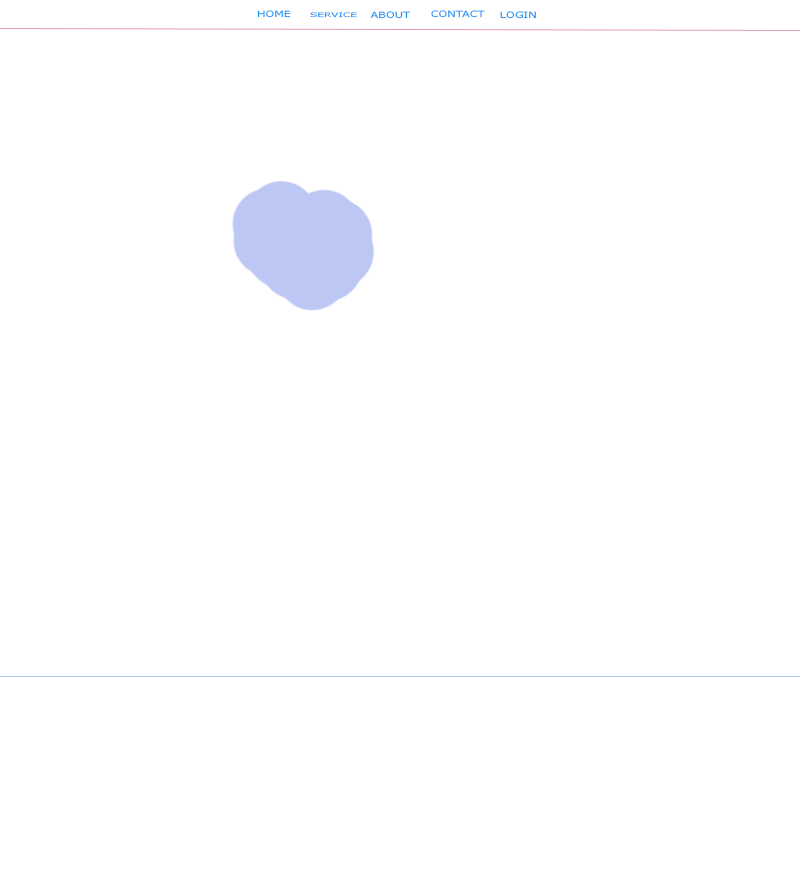
<style>
.page{position:relative;width:800px;height:876px;background:#ffffff}
.page>*{position:absolute;margin:0}
.t1{font:8.5px "Verdana";color:#0d92f3;scale:1.33 1}
.t2{font:5.9px "Verdana";color:#0d92f3;scale:1.79 1}
.t3{font:8.5px "Verdana";scale:1.33 1}
</style>
<div class="page">
<p class="t1" style="left:257px;top:10px;width:34px;height:8px">HOME</p>
<p class="t2" style="left:310px;top:12px;width:47px;height:6px">SERVICE</p>
<p class="t1" style="left:370px;top:11px;width:41px;height:8px">ABOUT</p>
<p class="t3" style="left:431px;top:10px;width:54px;height:8px">CONTACT</p>
<p class="t1" style="left:500px;top:11px;width:36px;height:8px">LOGIN</p>
</div>
